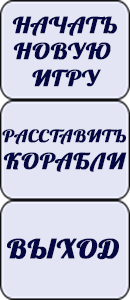
<style>
.page{position:relative;width:130px;height:300px;background:#e3e5f4}
.page>*{position:absolute;margin:0}
.t1{font:22px "Lobster";color:#040742;text-transform:uppercase;font-weight:bold;scale:1.18 1}
.t2{font:17px "Lobster";color:#040742;text-transform:uppercase;font-weight:bold;scale:1.18 1}
.t3{font:26px "Lobster";color:#040742;text-transform:uppercase;font-weight:bold;scale:1.18 1}
</style>
<div class="page">
<p class="t1" style="left:12px;top:16px;width:105px;height:71px;text-align:center">Начать<br>новую <br>игру</p>
<p class="t2" style="left:2px;top:129px;width:125px;height:43px;text-align:center">расставить<br><span class="t1">корабли</span></p>
<p class="t3" style="left:7px;top:238px;width:112px;height:22px">выход</p>
</div>
